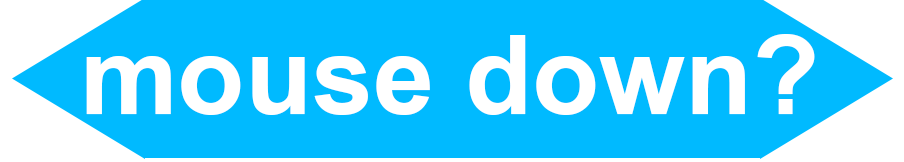
<style>
.page{position:relative;width:904px;height:162px;background:#00baff}
.page>*{position:absolute;margin:0}
.t1{font:110px "Arial-BoldMT";color:#ffffff}
</style>
<div class="page">
<p class="t1" style="left:86px;top:34px;width:729px;height:81px">mouse down?</p>
</div>
